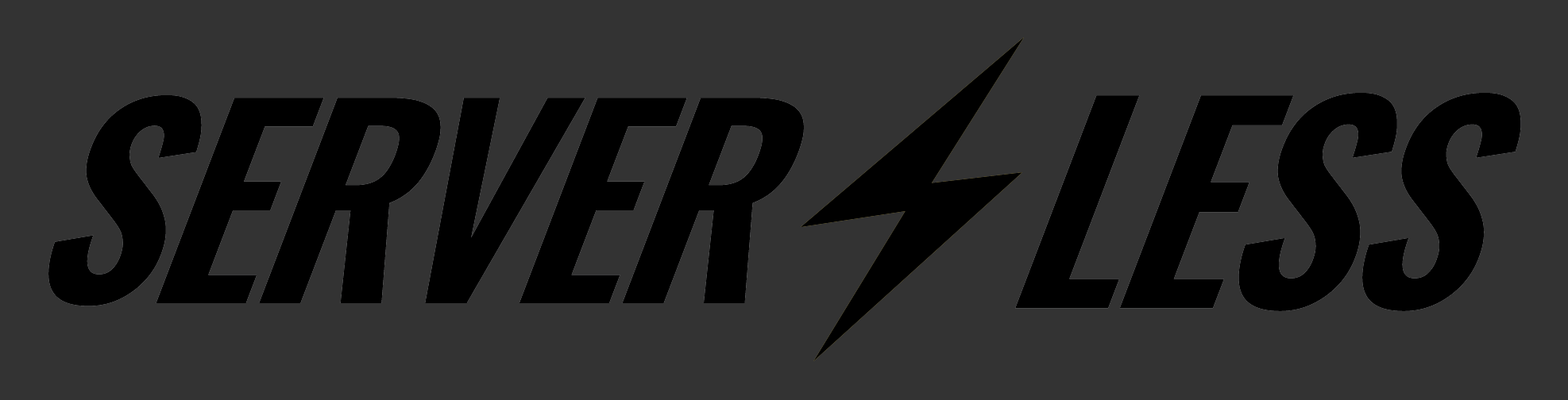
<style>
.page{position:relative;width:1568px;height:400px;background:#333333}
.page>*{position:absolute;margin:0}
.t1{font:263.2px "Oswald-Demi-BoldItalic";letter-spacing:-0.03em;color:#000000;scale:0.97 1}
.t2{font:272.6px "Oswald-Demi-BoldItalic";letter-spacing:-0.03em;color:#000000;scale:0.97 1}
</style>
<div class="page">
<p class="t1" style="left:48px;top:95px;width:756px;height:212px">SERVER</p>
<p class="t1" style="left:48px;top:95px;width:756px;height:212px">SERVER</p>
<p class="t1" style="left:48px;top:95px;width:756px;height:212px">SERVER</p>
<p class="t2" style="left:1015px;top:93px;width:506px;height:218px">LESS</p>
<p class="t2" style="left:1015px;top:93px;width:506px;height:218px">LESS</p>
<p class="t2" style="left:1015px;top:93px;width:506px;height:218px">LESS</p>
</div>
